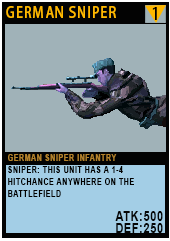
<style>
.page{position:relative;width:170px;height:241px;background:#a0b2b8}
.page>*{position:absolute;margin:0}
.t1{font:15.1px "AdobeHeitiStd-Regular";letter-spacing:0.08em;color:#ffb800;text-transform:uppercase;scale:0.86 1}
.t2{font:17.4px "AdobeHeitiStd-Regular";letter-spacing:0.08em;color:#000000;text-transform:uppercase;scale:0.86 1}
.t3{font:9.3px/12px "Arial-BoldMT";letter-spacing:0.08em;color:#020100;text-transform:uppercase;scale:0.76 1}
.t4{font:9.3px/20.2px "Arial-BoldMT";letter-spacing:0.08em;color:#b4832c;text-transform:uppercase;scale:0.76 1}
.t5{font:13.9px/12px "Arial-BoldMT";letter-spacing:0.08em;color:#050606;text-transform:uppercase;scale:0.76 1}
</style>
<div class="page">
<p class="t1" style="left:6px;top:6px;width:110px;height:12px">German Sniper</p>
<p class="t2" style="left:152px;top:7px;width:5px;height:13px">1</p>
<p class="t3" style="left:8px;top:154px;width:155px;height:79px"><span class="t4">German Sniper Infantry<br></span>Sniper: this unit has a 1-4 Hitchance anywhere on the battlefield<br><br><span class="t5">atk:500<br>def:250</span></p>
</div>
